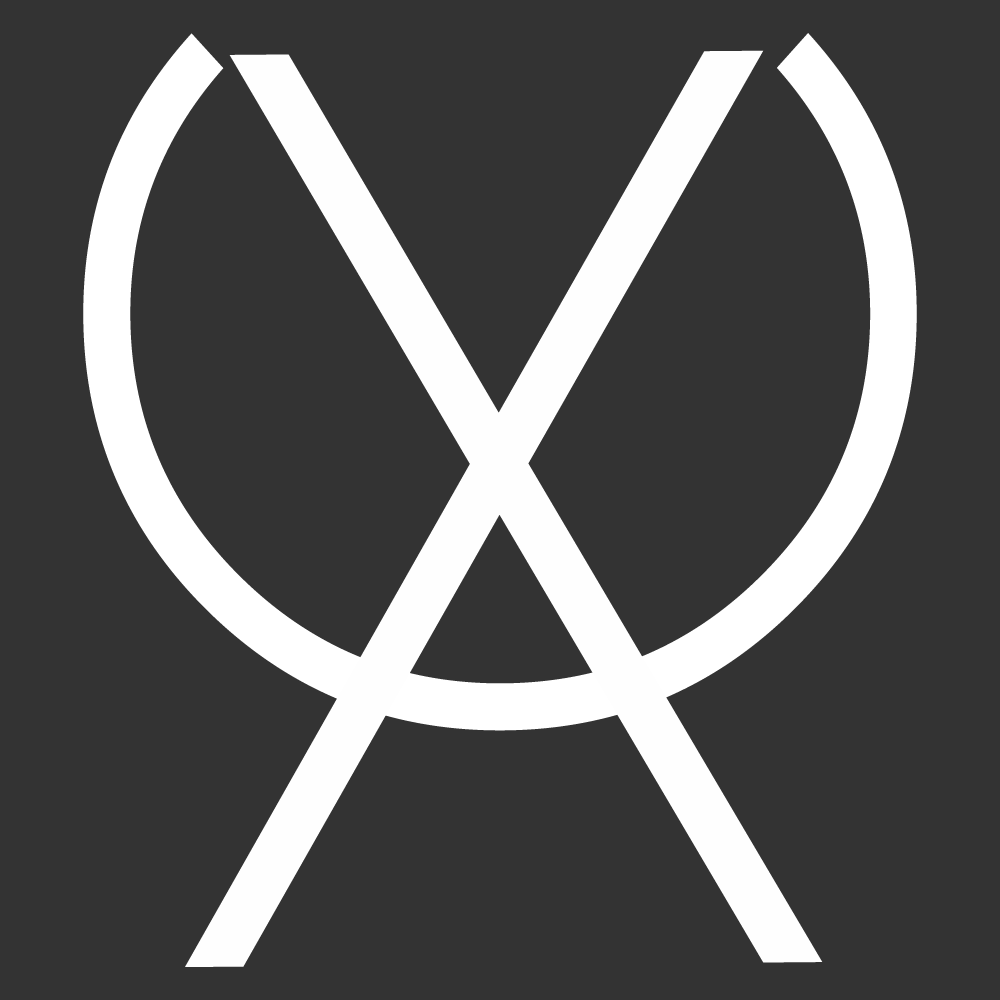
<style>
.page{position:relative;width:1000px;height:1000px;background:#333333}
.page>*{position:absolute;margin:0}
.t1{font:1041.7px "CaviarDreams";color:#ffffff}
.t2{font:1166.7px "CaviarDreams";color:#fefefe}
</style>
<div class="page">
<p class="t1" style="left:83px;top:33px;width:834px;height:698px;rotate:-90deg">C</p>
<p class="t2" style="left:185px;top:50px;width:638px;height:917px">X</p>
</div>
